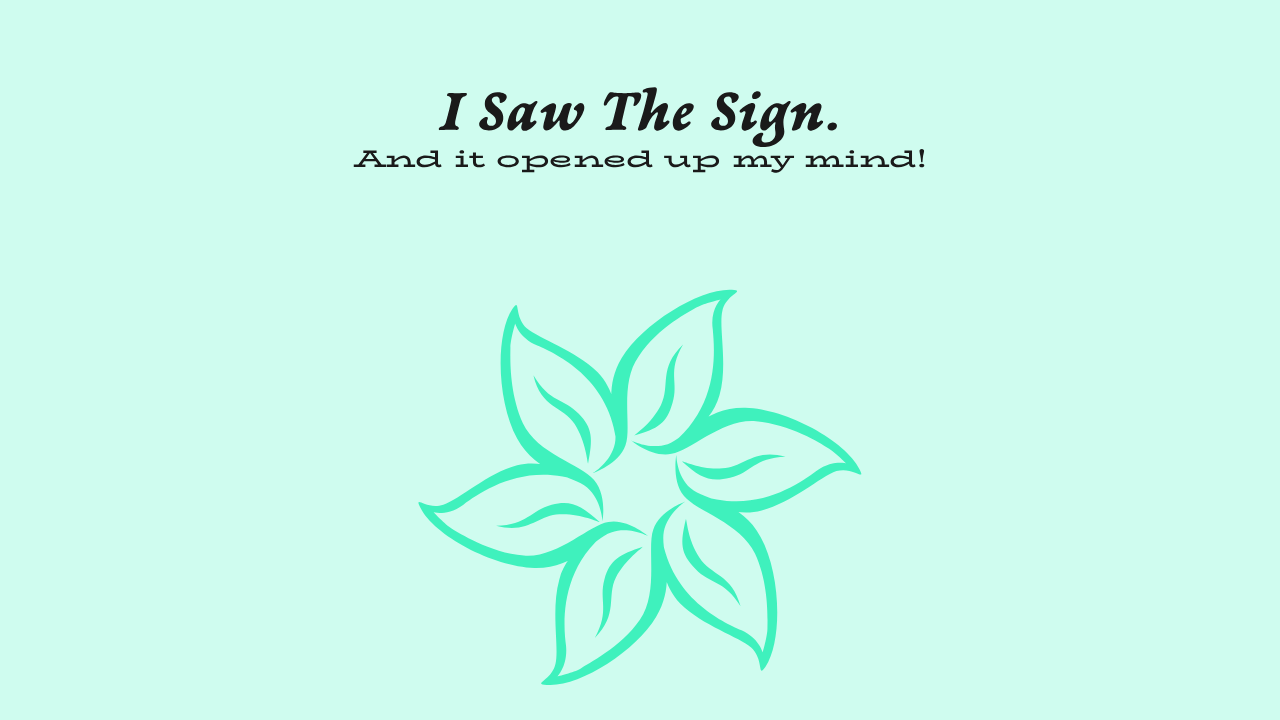
<style>
.page{position:relative;width:1280px;height:720px;background:#cffcef}
.page>*{position:absolute;margin:0}
.t1{font:61px "NewtSerifBold-Italic";color:#1a1a1a}
.t2{font:24px "BioRhymeExpanded-Bold";color:#1a1a1a}
</style>
<div class="page">
<p class="t1" style="left:438px;top:87px;width:399px;height:61px">I Saw The Sign.</p>
<p class="t2" style="left:353px;top:148px;width:572px;height:25px">And it opened up my mind!</p>
</div>
